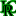
<style>
.page{position:relative;width:16px;height:16px}
.page>*{position:absolute;margin:0}
.t1{font:18px "Minion-Bold";color:#002901}
.t2{font:18px "Minion-Bold"}
</style>
<div class="page">
<p class="t1" style="left:0px;top:0px;width:7px;height:13px">I</p>
<p class="t2" style="left:2px;top:4px;width:12px;height:13px">R</p>
<p class="t2" style="left:6px;top:0px;width:12px;height:13px">C</p>
</div>
